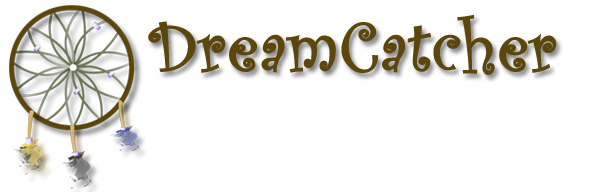
<style>
.page{position:relative;width:600px;height:192px;background:#ffffff}
.page>*{position:absolute;margin:0}
.t1{font:72px "CurlzMT";color:#5c460c;font-weight:bold}
</style>
<div class="page">
<p class="t1" style="left:148px;top:14px;width:409px;height:61px">DreamCatcher</p>
</div>
